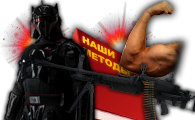
<style>
.page{position:relative;width:195px;height:120px}
.page>*{position:absolute;margin:0}
.t1{font:9px "Arial-Black";scale:1.16 1}
</style>
<div class="page">
<p class="t1" style="left:82px;top:36px;width:48px;height:41px;rotate:27deg">НАШИ<br>МЕТОДЫ</p>
</div>
